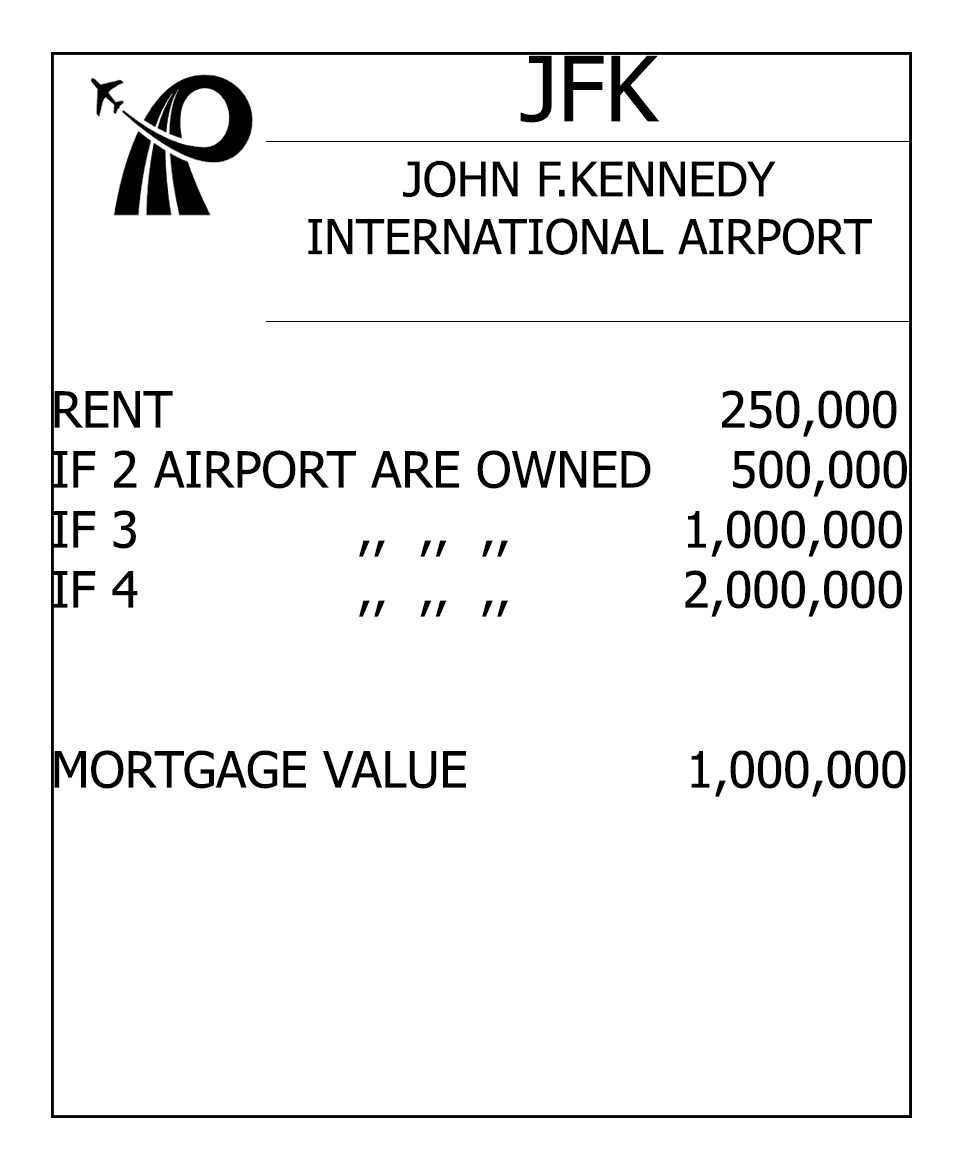
<style>
.page{position:relative;width:966px;height:1164px;background:#ffffff}
.page>*{position:absolute;margin:0}
.t1{font:90px "Tahoma";color:#000000}
.t2{font:48px "Tahoma";color:#000000}
.t3{font:50px "Tahoma";color:#000000}
.t4{font:60px "Tahoma";color:#000000}
</style>
<div class="page">
<p class="t1" style="left:520px;top:55px;width:140px;height:68px">JFK</p>
<p class="t2" style="left:308px;top:160px;width:564px;height:95px;text-align:center">JOHN F.KENNEDY<br>INTERNATIONAL AIRPORT</p>
<p class="t3" style="left:53px;top:390px;width:854px;height:407px;text-align:right"><span class="t4"><br></span>RENT                                   250,000<br>IF 2 AIRPORT ARE OWNED     500,000<br>IF 3              ,,  ,,  ,,           1,000,000<br>IF 4              ,,  ,,  ,,           2,000,000<br><br><br>MORTGAGE VALUE              1,000,000</p>
</div>
